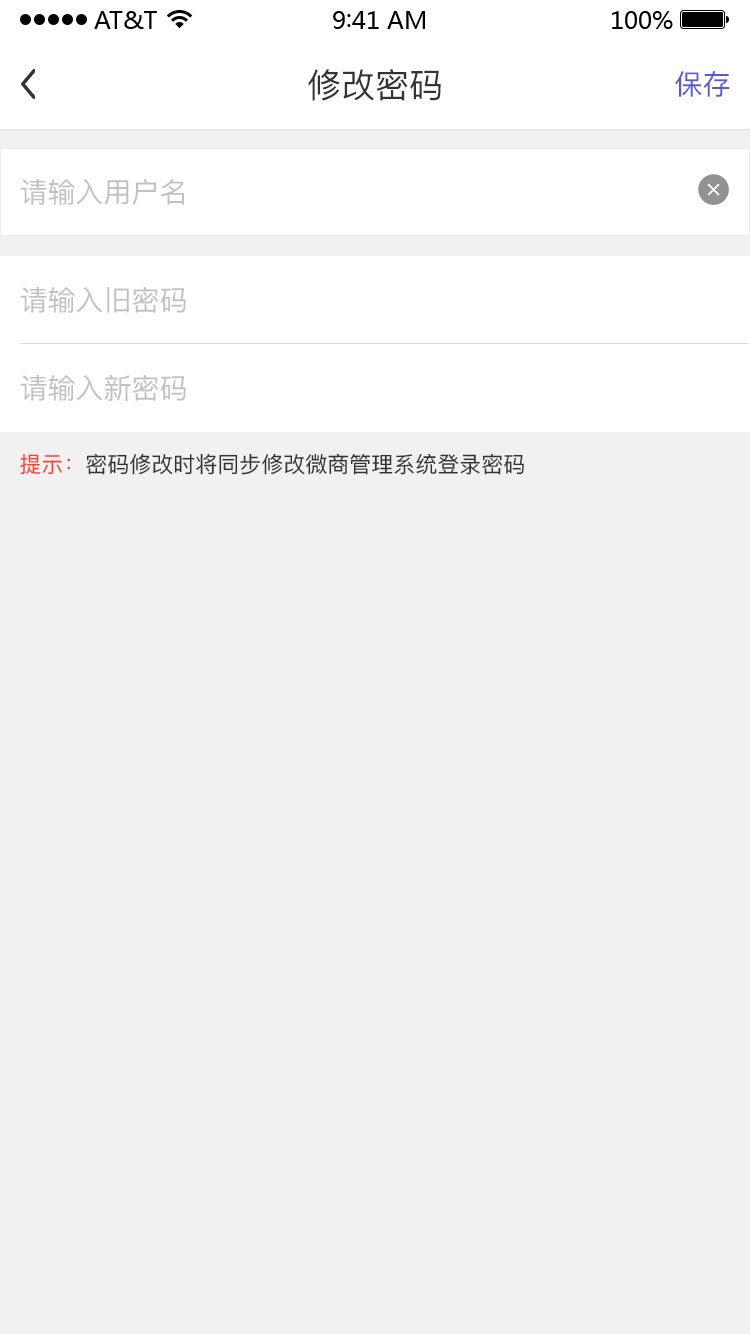
<style>
.page{position:relative;width:750px;height:1334px;background:#f1f1f1}
.page>*{position:absolute;margin:0}
.t1{font:34px "PingFang-SC-Medium";color:#333333}
.t2{font:28px "PingFang-SC-Medium";color:#595ad3}
.t3{font:28px "PingFang-SC-Medium";color:#c1c1c1}
.t4{font:22px "PingFang-SC-Medium";color:#333333}
.t5{font:22px "PingFang-SC-Medium";color:#ff3b30}
</style>
<div class="page">
<p class="t1" style="left:308px;top:69px;width:133px;height:32px">修改密码</p>
<p class="t2" style="left:675px;top:71px;width:55px;height:26px">保存</p>
<p class="t3" style="left:20px;top:179px;width:164px;height:26px">请输入用户名</p>
<p class="t3" style="left:20px;top:287px;width:166px;height:26px">请输入旧密码</p>
<p class="t3" style="left:20px;top:374px;width:166px;height:27px">请输入新密码</p>
<p class="t4" style="left:20px;top:453px;width:504px;height:22px"><span class="t5">提示：</span>密码修改时将同步修改微商管理系统登录密码</p>
</div>
